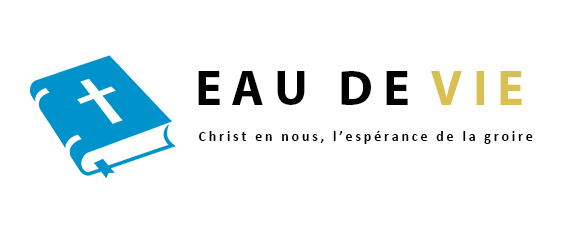
<style>
.page{position:relative;width:563px;height:245px;background:#ffffff}
.page>*{position:absolute;margin:0}
.t1{font:50px "MyriadPro-Bold";letter-spacing:0.2em;color:#000000}
.t2{font:50px "MyriadPro-Bold";letter-spacing:0.2em;color:#dac052}
.t3{font:14px "Calibri-Bold";letter-spacing:0.2em;color:#000000}
</style>
<div class="page">
<p class="t1" style="left:198px;top:71px;width:210px;height:34px">EAU DE</p>
<p class="t2" style="left:431px;top:71px;width:91px;height:34px">VIE</p>
<p class="t3" style="left:199px;top:131px;width:334px;height:13px">Christ en nous, l’espérance de la groire</p>
</div>
